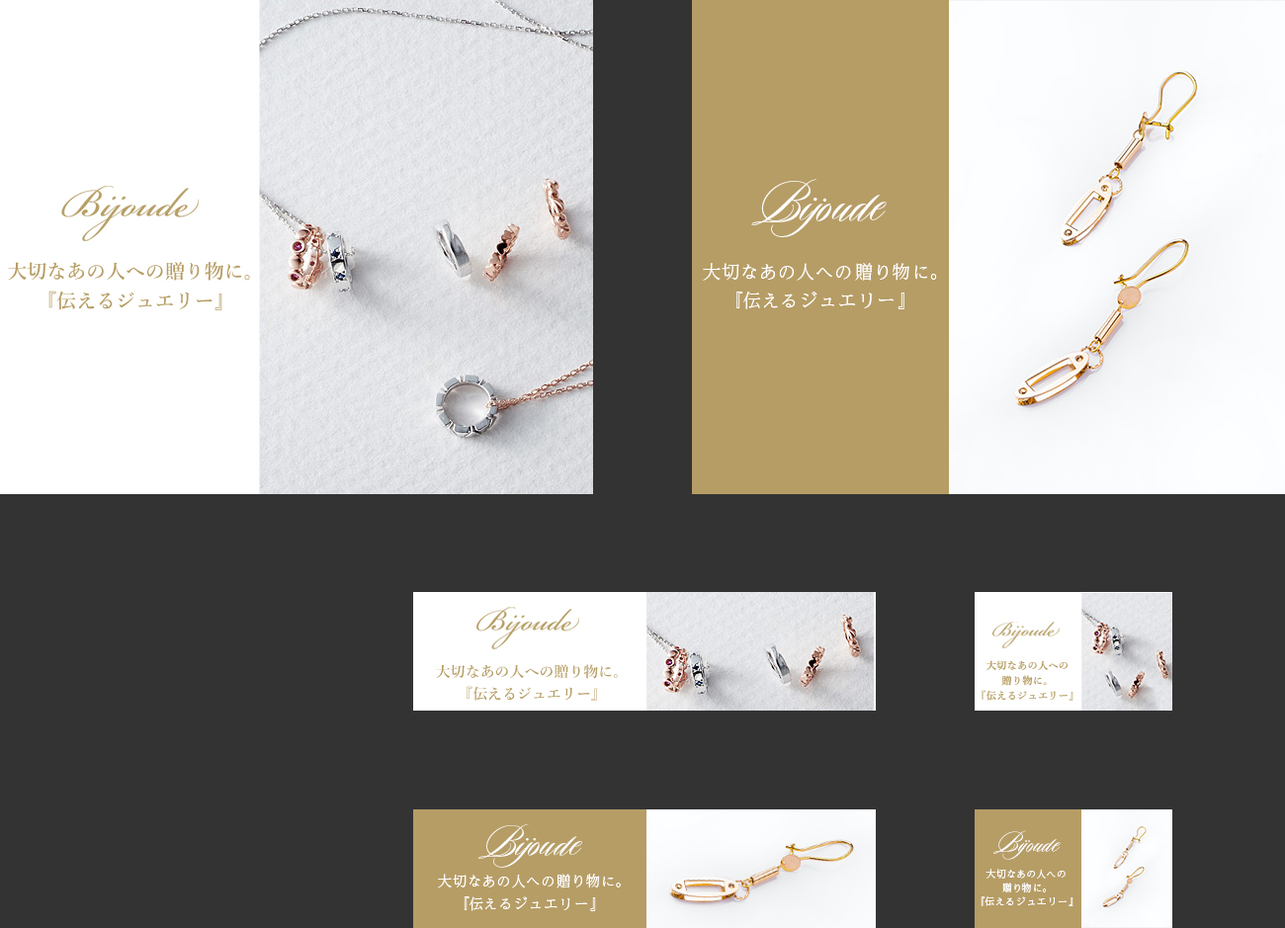
<style>
.page{position:relative;width:1285px;height:928px;background:#333333}
.page>*{position:absolute;margin:0}
.t1{font:66.9px "DuendePro";color:#ffffff}
.t2{font:17.5px "UDReiminPr6N-Light";color:#ffffff}
.t3{font:18.5px "UDReiminPr6N-Light";color:#ffffff}
.t4{font:50.7px "DuendePro";color:#ffffff}
.t5{font:32.9px "DuendePro";color:#ffffff}
.t6{font:9.4px/13.8px "UDReiminPr6N-Light";color:#ffffff}
.t7{font:10px/13.8px "UDReiminPr6N-Light";color:#ffffff}
.t8{font:13.8px "UDReiminPr6N-Light";color:#ffffff}
.t9{font:14.6px "UDReiminPr6N-Light";color:#ffffff}
.t10{font:9.8px "UDReiminPr6N-Light";color:#ffffff}
.t11{font:9.3px "UDReiminPr6N-Light";color:#ffffff}
</style>
<div class="page">
<p class="t1" style="left:751px;top:179px;width:136px;height:58px">Bijoude</p>
<p class="t2" style="left:703px;top:263px;width:234px;height:18px"><span class="t3">大切</span>なあの<span class="t3">人</span>への<span class="t3">贈</span>り<span class="t3">物</span>に<span class="t3">。</span></p>
<p class="t3" style="left:736px;top:292px;width:168px;height:17px">『伝<span class="t2">える</span>ジュエリー』</p>
<p class="t4" style="left:478px;top:823px;width:104px;height:45px">Bijoude</p>
<p class="t5" style="left:993px;top:830px;width:68px;height:30px">Bijoude</p>
<p class="t6" style="left:985px;top:869px;width:80px;height:24px;text-align:center"><span class="t7">大切</span>なあの<span class="t7">人</span>への<br><span class="t7">贈</span>り<span class="t7">物</span>に<span class="t7">。</span></p>
<p class="t8" style="left:438px;top:874px;width:183px;height:15px"><span class="t9">大切</span>なあの<span class="t9">人</span>への<span class="t9">贈</span>り<span class="t9">物</span>に<span class="t9">。</span></p>
<p class="t9" style="left:464px;top:896px;width:132px;height:15px">『伝<span class="t8">える</span>ジュエリー』</p>
<p class="t10" style="left:980px;top:896px;width:93px;height:10px">『伝<span class="t11">える</span>ジュエリー』</p>
</div>
